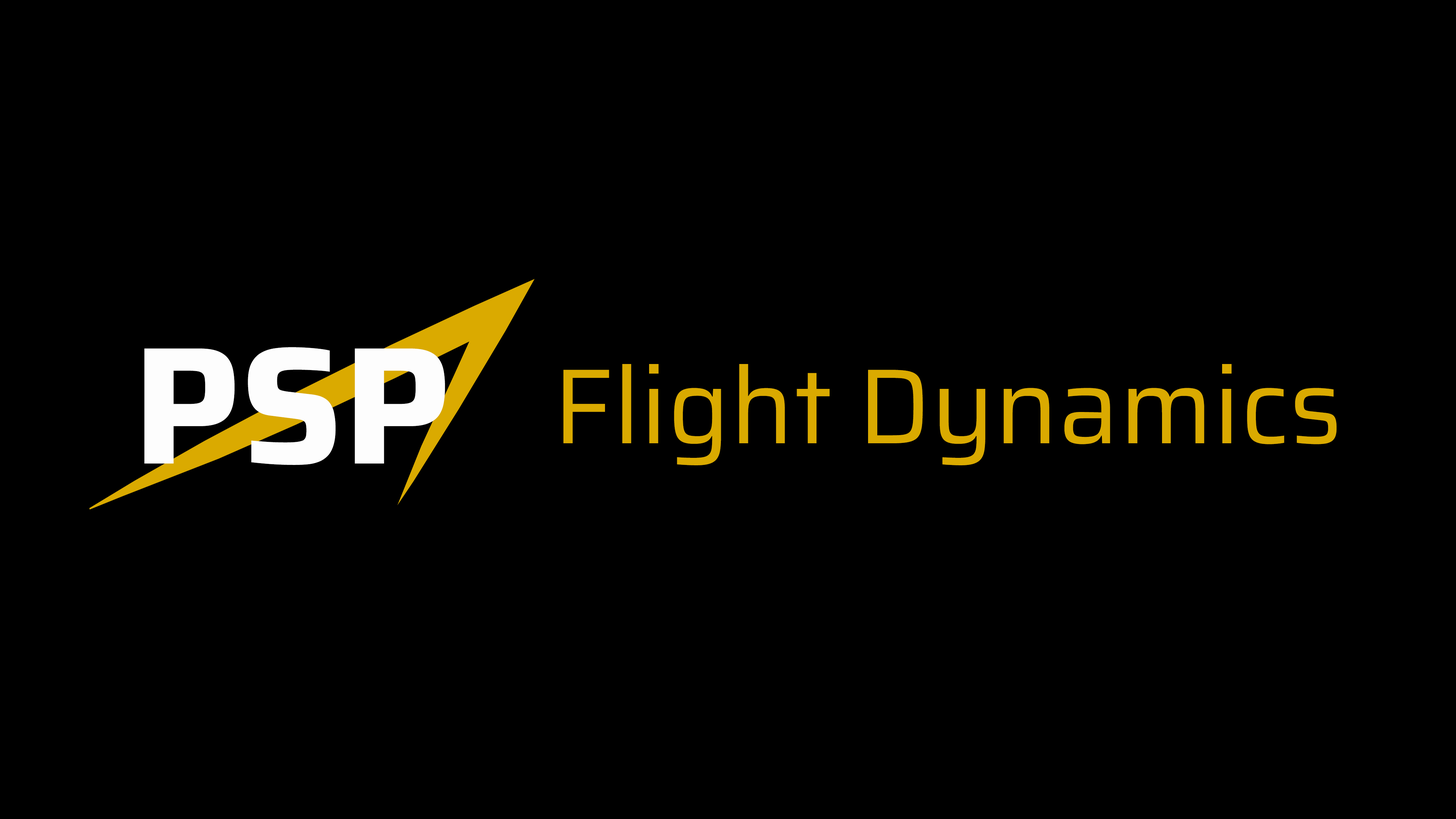
<style>
.page{position:relative;width:1456px;height:819px;background:#000000}
.page>*{position:absolute;margin:0}
.t1{font:167.1px "Saira-Bold";color:#fdfdfd}
.t2{font:106.6px "Saira-Regular";color:#daaa00}
</style>
<div class="page">
<p class="t1" style="left:144px;top:347px;width:301px;height:118px">PSP</p>
<p class="t2" style="left:563px;top:364px;width:774px;height:101px">Flight Dynamics</p>
</div>
